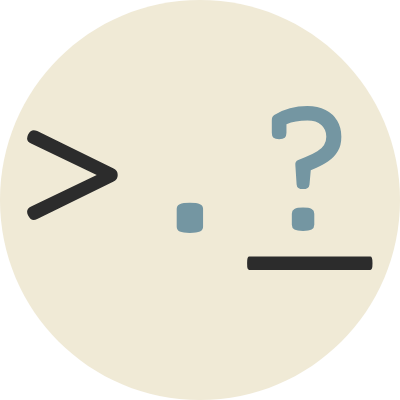
<style>
.page{position:relative;width:400px;height:400px;background:#f0ead6}
.page>*{position:absolute;margin:0}
.t1{font:200px "CourierPrime-Regular";color:#7496a2}
.t2{font:200px "CourierPrime-Regular";color:#2c2c2c}
</style>
<div class="page">
<p class="t1" style="left:271px;top:106px;width:71px;height:125px">?</p>
<p class="t2" style="left:27px;top:130px;width:346px;height:140px">&gt;<span class="t1">.</span>_</p>
</div>
